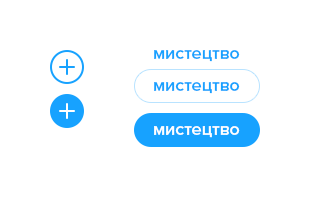
<style>
.page{position:relative;width:310px;height:197px;background:#ffffff}
.page>*{position:absolute;margin:0}
.t1{font:18px "ProximaNova-Semibold";color:#17a2ff}
.t2{font:18px "ProximaNova-Semibold";color:#ffffff}
</style>
<div class="page">
<p class="t1" style="left:154px;top:50px;width:86px;height:12px">мистецтво</p>
<p class="t1" style="left:154px;top:82px;width:86px;height:12px">мистецтво</p>
<p class="t2" style="left:154px;top:126px;width:86px;height:12px">мистецтво</p>
</div>
